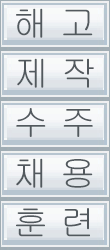
<style>
.page{position:relative;width:110px;height:250px}
.page>*{position:absolute;margin:0}
.t1{font:35.5px "Gulim";color:#52595e}
</style>
<div class="page">
<p class="t1" style="left:16px;top:8px;width:77px;height:30px">해 고</p>
<p class="t1" style="left:17px;top:58px;width:77px;height:30px">제 작</p>
<p class="t1" style="left:16px;top:108px;width:77px;height:29px">수 주</p>
<p class="t1" style="left:16px;top:158px;width:77px;height:30px">채 용</p>
<p class="t1" style="left:16px;top:208px;width:74px;height:29px">훈 련</p>
</div>
